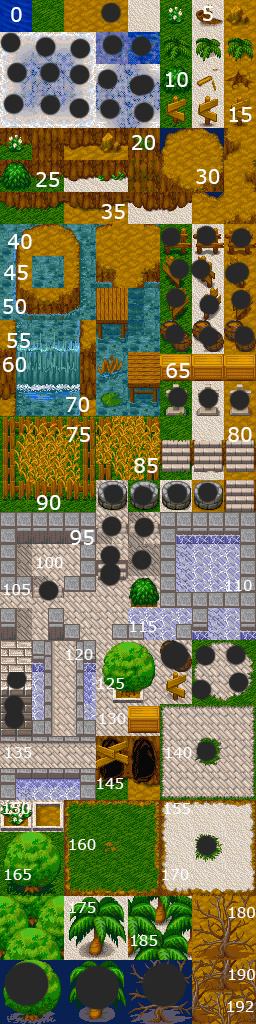
<style>
.page{position:relative;width:256px;height:1024px}
.page>*{position:absolute;margin:0}
.t1{font:20px "Verdana";color:#ffffff}
.t2{font:15px "Verdana";color:#ffffff}
</style>
<div class="page">
<p class="t1" style="left:203px;top:6px;width:10px;height:15px">5</p>
<p class="t1" style="left:11px;top:7px;width:11px;height:15px">0</p>
<p class="t1" style="left:166px;top:72px;width:22px;height:15px">10</p>
<p class="t1" style="left:229px;top:107px;width:23px;height:15px">15</p>
<p class="t1" style="left:132px;top:135px;width:23px;height:15px">20</p>
<p class="t1" style="left:36px;top:172px;width:24px;height:15px">25</p>
<p class="t1" style="left:196px;top:169px;width:24px;height:15px">30</p>
<p class="t1" style="left:102px;top:204px;width:23px;height:15px">35</p>
<p class="t1" style="left:7px;top:234px;width:25px;height:15px">40</p>
<p class="t1" style="left:4px;top:265px;width:24px;height:15px">45</p>
<p class="t1" style="left:3px;top:299px;width:23px;height:15px">50</p>
<p class="t1" style="left:7px;top:333px;width:23px;height:15px">55</p>
<p class="t1" style="left:3px;top:357px;width:23px;height:15px">60</p>
<p class="t1" style="left:166px;top:363px;width:24px;height:15px">65</p>
<p class="t1" style="left:66px;top:397px;width:23px;height:15px">70</p>
<p class="t1" style="left:67px;top:427px;width:23px;height:15px">75</p>
<p class="t1" style="left:228px;top:427px;width:24px;height:15px">80</p>
<p class="t1" style="left:134px;top:458px;width:24px;height:15px">85</p>
<p class="t1" style="left:37px;top:495px;width:24px;height:15px">90</p>
<p class="t1" style="left:70px;top:530px;width:24px;height:15px">95</p>
<p class="t2" style="left:36px;top:557px;width:27px;height:11px">100</p>
<p class="t2" style="left:225px;top:580px;width:27px;height:11px">110</p>
<p class="t2" style="left:3px;top:584px;width:27px;height:11px">105</p>
<p class="t2" style="left:130px;top:621px;width:27px;height:11px">115</p>
<p class="t2" style="left:66px;top:649px;width:27px;height:11px">120</p>
<p class="t2" style="left:97px;top:678px;width:27px;height:11px">125</p>
<p class="t2" style="left:99px;top:713px;width:27px;height:11px">130</p>
<p class="t2" style="left:5px;top:747px;width:27px;height:11px">135</p>
<p class="t2" style="left:165px;top:747px;width:27px;height:11px">140</p>
<p class="t2" style="left:97px;top:778px;width:27px;height:11px">145</p>
<p class="t2" style="left:3px;top:803px;width:27px;height:11px">150</p>
<p class="t2" style="left:164px;top:803px;width:27px;height:11px">155</p>
<p class="t2" style="left:69px;top:839px;width:27px;height:11px">160</p>
<p class="t2" style="left:5px;top:869px;width:26px;height:11px">165</p>
<p class="t2" style="left:162px;top:869px;width:27px;height:11px">170</p>
<p class="t2" style="left:69px;top:902px;width:27px;height:11px">175</p>
<p class="t2" style="left:229px;top:907px;width:26px;height:11px">180</p>
<p class="t2" style="left:131px;top:935px;width:27px;height:11px">185</p>
<p class="t2" style="left:229px;top:969px;width:26px;height:11px">190</p>
<p class="t2" style="left:227px;top:1001px;width:27px;height:11px">192</p>
</div>
